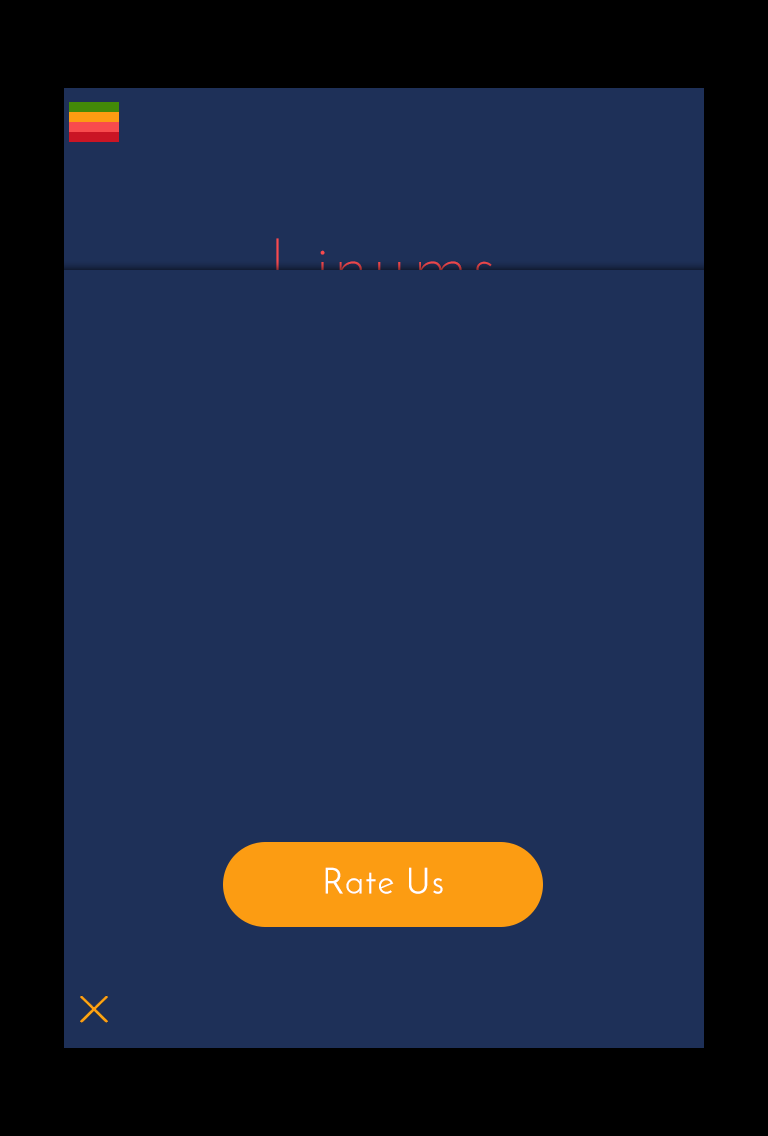
<style>
.page{position:relative;width:768px;height:1136px;background:#1e3058}
.page>*{position:absolute;margin:0}
.t1{font:72px "JosefinSans-Light";letter-spacing:0.04em}
.t2{font:36px "JosefinSans";letter-spacing:0.04em;color:#ffffff}
</style>
<div class="page">
<p class="t1" style="left:276px;top:238px;width:217px;height:52px">Linums</p>
<p class="t2" style="left:325px;top:867px;width:118px;height:27px">Rate Us</p>
</div>
